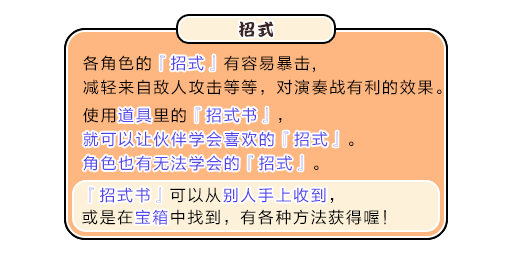
<style>
.page{position:relative;width:512px;height:256px;background:#ffffff}
.page>*{position:absolute;margin:0}
.t1{font:17px "DFPKanTingLiuW9";letter-spacing:0.1em;color:#3b2626}
.t2{font:16px/24px "FZLTHJW--GB1-0";letter-spacing:0.1em;color:#000000}
.t3{font:16px/24px "FZLTHJW--GB1-0";letter-spacing:0.1em;color:#5444ed}
.t4{font:16px "FZLTHJW--GB1-0";letter-spacing:0.1em;color:#5444ed}
.t5{font:16px/22px "FZLTHJW--GB1-0";letter-spacing:0.1em;color:#000000}
.t6{font:16px/22px "FZLTHJW--GB1-0";letter-spacing:0.1em;color:#5444ed}
</style>
<div class="page">
<p class="t1" style="left:238px;top:21px;width:36px;height:16px">招式</p>
<p class="t2" style="left:83px;top:55px;width:359px;height:40px">各角色的<span class="t3">『招式』</span>有容易暴击,<br>减轻来自敌人攻击等等，对演奏战有利的效果。</p>
<p class="t4" style="left:160px;top:55px;width:55px;height:16px">『招式』</p>
<p class="t3" style="left:83px;top:107px;width:271px;height:64px"><span class="t2">使用</span>道具<span class="t2">里的</span>『招式书』<span class="t2">，<br></span>就可以让伙伴学会喜欢的『招式』<span class="t2">。<br></span>角色也有无法学会的『招式』<span class="t2">。</span></p>
<p class="t3" style="left:83px;top:107px;width:255px;height:64px"><span class="t2">　　</span>道具　　『招式书』<br>就可以让伙伴学会喜欢的『招式』<br>角色也有无法学会的『招式』</p>
<p class="t5" style="left:82px;top:187px;width:304px;height:38px"><span class="t6">『招式书』</span>可以从<span class="t6">别人手上收到</span>，<br>或是在<span class="t6">宝箱</span>中找到，有各种方法获得喔！</p>
<p class="t6" style="left:89px;top:187px;width:237px;height:38px">『招式书』　　　别人手上收到<br>　　　宝箱</p>
</div>
